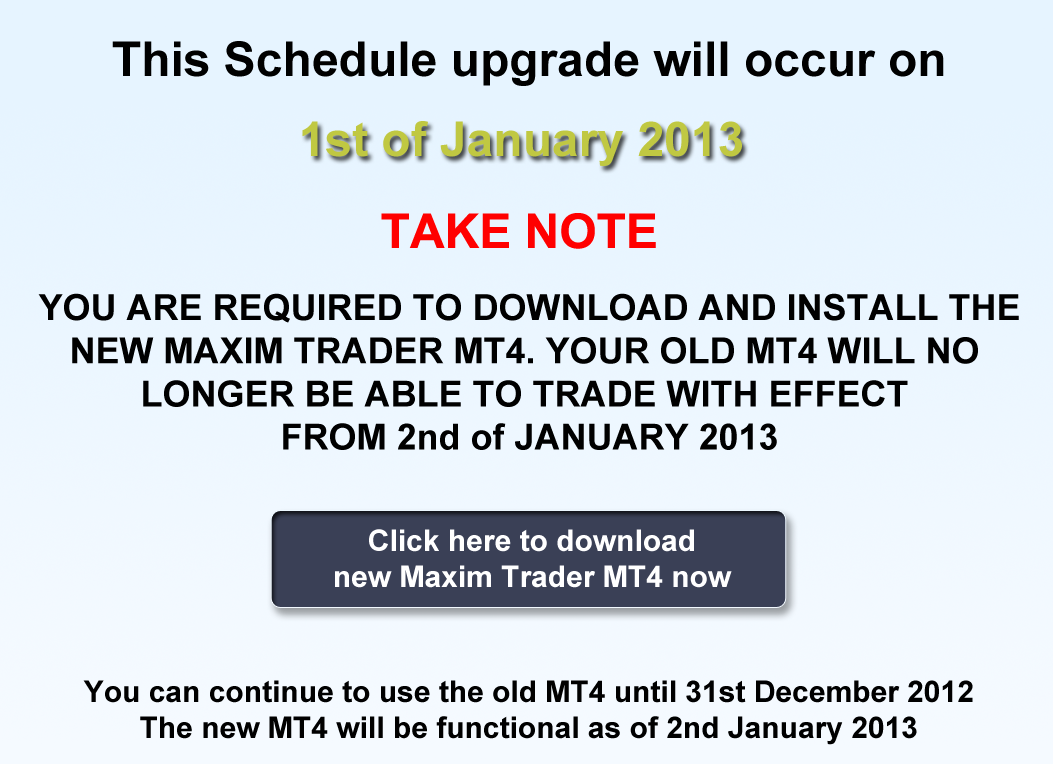
<style>
.page{position:relative;width:1053px;height:764px}
.page>*{position:absolute;margin:0}
.t1{font:48px "Arial-BoldMT";color:#000000}
.t2{font:48px "Arial-BoldMT";color:#c0c842}
.t3{font:48px "Arial-BoldMT";color:#ff0000}
.t4{font:36px "Arial-BoldMT";color:#000000}
.t5{font:30px "Arial-BoldMT";color:#ffffff}
.t6{font:30px "Arial-BoldMT";color:#000000}
</style>
<div class="page">
<p class="t1" style="left:112px;top:41px;width:832px;height:45px">This Schedule upgrade will occur on</p>
<p class="t2" style="left:302px;top:121px;width:440px;height:45px">1st of January 2013</p>
<p class="t3" style="left:381px;top:213px;width:275px;height:36px">TAKE NOTE</p>
<p class="t4" style="left:38px;top:293px;width:981px;height:157px;text-align:center">YOU ARE REQUIRED TO DOWNLOAD AND INSTALL THE<br>NEW MAXIM TRADER MT4. YOUR OLD MT4 WILL NO <br>LONGER BE ABLE TO TRADE WITH EFFECT <br>FROM 2nd of JANUARY 2013</p>
<p class="t5" style="left:335px;top:529px;width:397px;height:59px;text-align:center">Click here to download<br>new Maxim Trader MT4 now</p>
<p class="t6" style="left:83px;top:680px;width:890px;height:65px;text-align:center">You can continue to use the old MT4 until 31st December 2012<br>The new MT4 will be functional as of 2nd January 2013</p>
</div>
